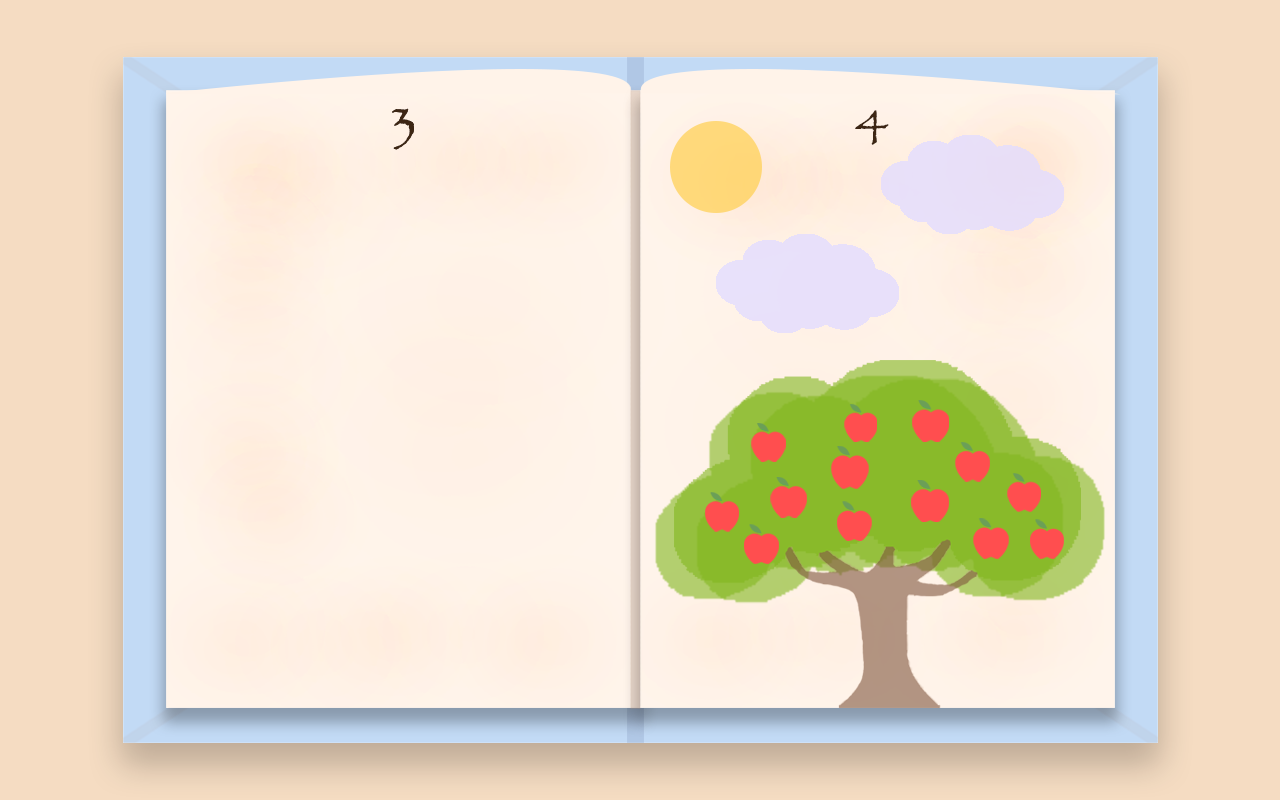
<style>
.page{position:relative;width:1280px;height:800px}
.page>*{position:absolute;margin:0}
.t1{font:50px "Papyrus";color:#3d2614}
</style>
<div class="page">
<p class="t1" style="left:392px;top:108px;width:22px;height:42px">3</p>
<p class="t1" style="left:392px;top:108px;width:22px;height:42px">3</p>
<p class="t1" style="left:855px;top:110px;width:34px;height:35px">4</p>
</div>
